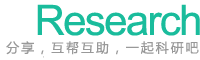
<style>
.page{position:relative;width:200px;height:60px;background:#ffffff}
.page>*{position:absolute;margin:0}
.t1{font:42px "ArialMT";letter-spacing:-0.04em;color:#1abc9c}
.t2{font:13px "MicrosoftYaHei";letter-spacing:0.15em;color:#999999}
</style>
<div class="page">
<p class="t1" style="left:37px;top:4px;width:163px;height:32px">Research</p>
<p class="t2" style="left:6px;top:41px;width:193px;height:14px">分享，互帮互助，一起科研吧</p>
</div>
